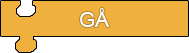
<style>
.page{position:relative;width:189px;height:53px;background:#f0b03d}
.page>*{position:absolute;margin:0}
.t1{font:21.1px "ArialMT";color:#ffffff}
</style>
<div class="page">
<p class="t1" style="left:80px;top:8px;width:30px;height:19px">GÅ</p>
</div>
